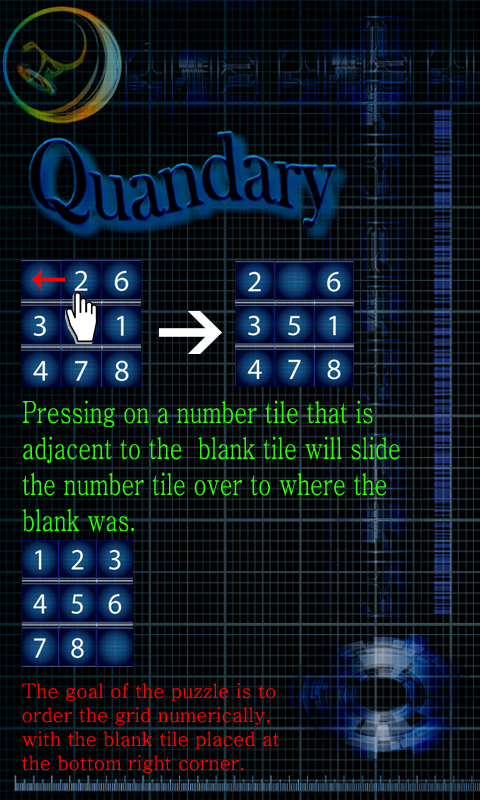
<style>
.page{position:relative;width:480px;height:800px;background:#000000}
.page>*{position:absolute;margin:0}
.t1{font:30px "Batang";color:#2aff00;scale:0.75 1}
.t2{font:20px "Batang";color:#ff0000}
</style>
<div class="page">
<p class="t1" style="left:22px;top:400px;width:378px;height:132px">Pressing on a number tile that is <br>adjacent to the  blank tile will slide<br>the number tile over to where the<br>blank was.</p>
<p class="t2" style="left:21px;top:683px;width:259px;height:90px">The goal of the puzzle is to <br>order the grid numerically,<br>with the blank tile placed at <br>the bottom right corner.</p>
</div>
